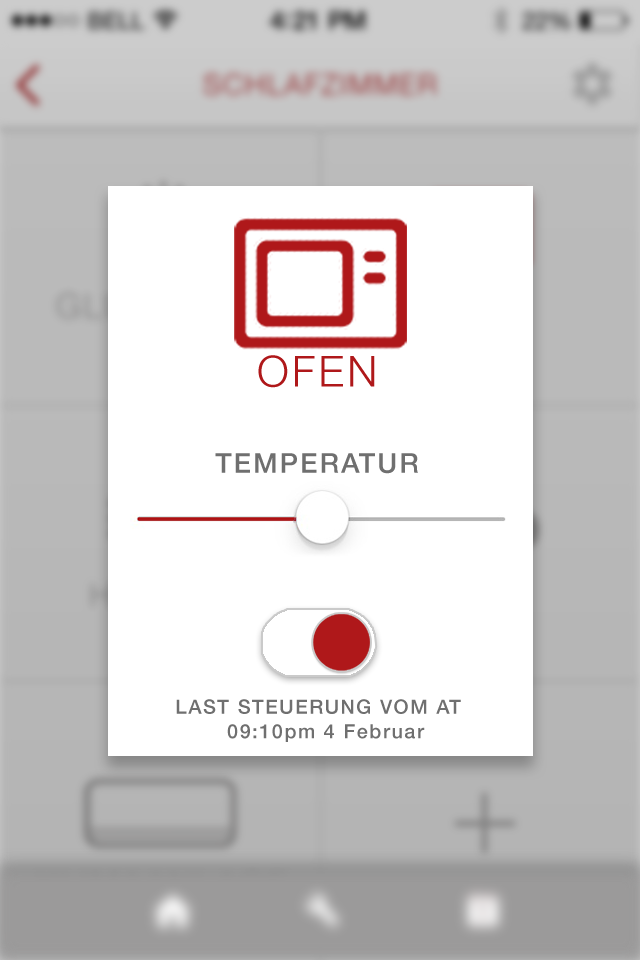
<style>
.page{position:relative;width:640px;height:960px;background:#ffffff}
.page>*{position:absolute;margin:0}
.t1{font:42.7px "HelveticaNeue-Light";letter-spacing:0.08em;color:#af181a}
.t2{font:27.4px "HelveticaNeue-Medium";letter-spacing:0.08em;color:#6f6f6f}
.t3{font:19.7px "HelveticaNeue-Medium";letter-spacing:0.08em;color:#6f6f6f}
</style>
<div class="page">
<p class="t1" style="left:258px;top:355px;width:117px;height:33px">OFEN</p>
<p class="t2" style="left:215px;top:453px;width:203px;height:21px">TEMPERATUR</p>
<p class="t3" style="left:176px;top:699px;width:285px;height:15px">LAST STEUERUNG VOM AT</p>
<p class="t3" style="left:227px;top:724px;width:198px;height:18px">09:10pm 4 Februar</p>
</div>
